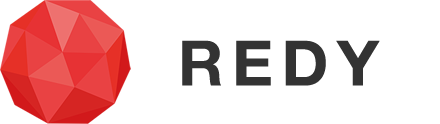
<style>
.page{position:relative;width:440px;height:124px;background:#ffffff}
.page>*{position:absolute;margin:0}
.t1{font:62.3px "HelveticaNeue-Bold";letter-spacing:0.14em;color:#333333}
</style>
<div class="page">
<p class="t1" style="left:182px;top:40px;width:198px;height:46px">REDY</p>
</div>
